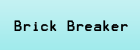
<style>
.page{position:relative;width:140px;height:50px}
.page>*{position:absolute;margin:0}
.t1{font:13px "Terminal";color:#000000;scale:0.91 1}
</style>
<div class="page">
<p class="t1" style="left:14px;top:20px;width:114px;height:11px">Brick Breaker</p>
</div>
